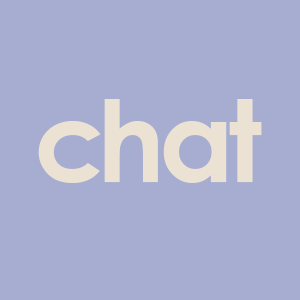
<style>
.page{position:relative;width:300px;height:300px;background:#a7add1}
.page>*{position:absolute;margin:0}
.t1{font:112.5px "CenturyGothic-Bold";letter-spacing:-0.045em;color:#ebe2d3}
.t2{font:112.5px "CenturyGothic-Bold";letter-spacing:-0.085em;color:#ebe2d3}
.t3{font:112.5px "CenturyGothic-Bold";letter-spacing:-0.04em;color:#ebe2d3}
.t4{font:112.5px "CenturyGothic-Bold";color:#ebe2d3}
</style>
<div class="page">
<p class="t1" style="left:38px;top:99px;width:224px;height:84px"><span class="t2">c</span>hat</p>
<p class="t3" style="left:45px;top:97px;width:218px;height:106px">p<span class="t4">r</span>int</p>
</div>
